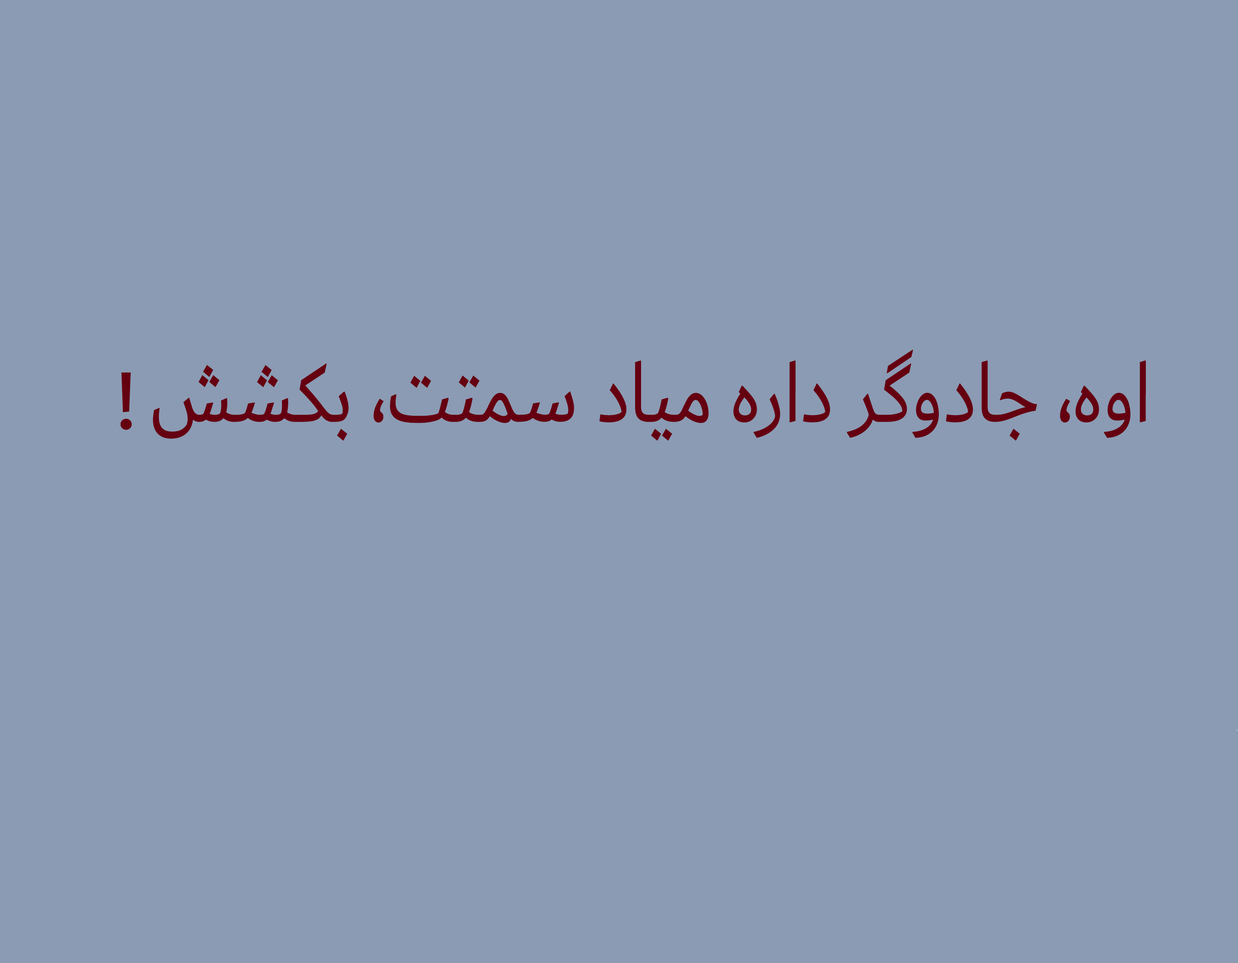
<style>
.page{position:relative;width:1238px;height:963px;background:#8b9bb4}
.page>*{position:absolute;margin:0}
.t1{font:89.9px "Dubai-Regular";color:#650011;scale:0.85 1}
.t2{font:87px "Dubai-Regular";color:#650011}
</style>
<div class="page">
<p class="t1" style="left:153px;top:349px;width:993px;height:92px">اوه، جادوگر داره میاد سمتت، بکشش</p>
<p class="t2" style="left:120px;top:372px;width:12px;height:58px">!</p>
</div>
